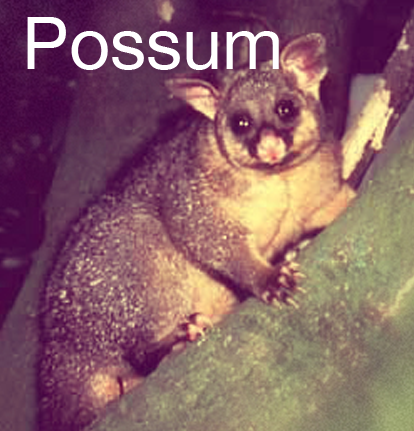
<style>
.page{position:relative;width:414px;height:431px}
.page>*{position:absolute;margin:0}
.t1{font:72px "HelveticaNeue";color:#ffffff}
</style>
<div class="page">
<p class="t1" style="left:27px;top:17px;width:252px;height:53px">Possum</p>
</div>
